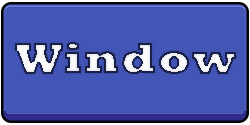
<style>
.page{position:relative;width:250px;height:125px;background:#4355b7}
.page>*{position:absolute;margin:0}
.t1{font:44px "Rockwell-ExtraBold";letter-spacing:0.04em}
</style>
<div class="page">
<p class="t1" style="left:15px;top:42px;width:221px;height:32px">Window</p>
</div>
